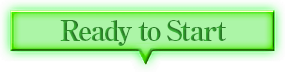
<style>
.page{position:relative;width:285px;height:72px}
.page>*{position:absolute;margin:0}
.t1{font:28px "RyuminPro-ExBold";letter-spacing:-0.08em}
</style>
<div class="page">
<p class="t1" style="left:60px;top:20px;width:166px;height:26px">Ready to Start</p>
</div>
